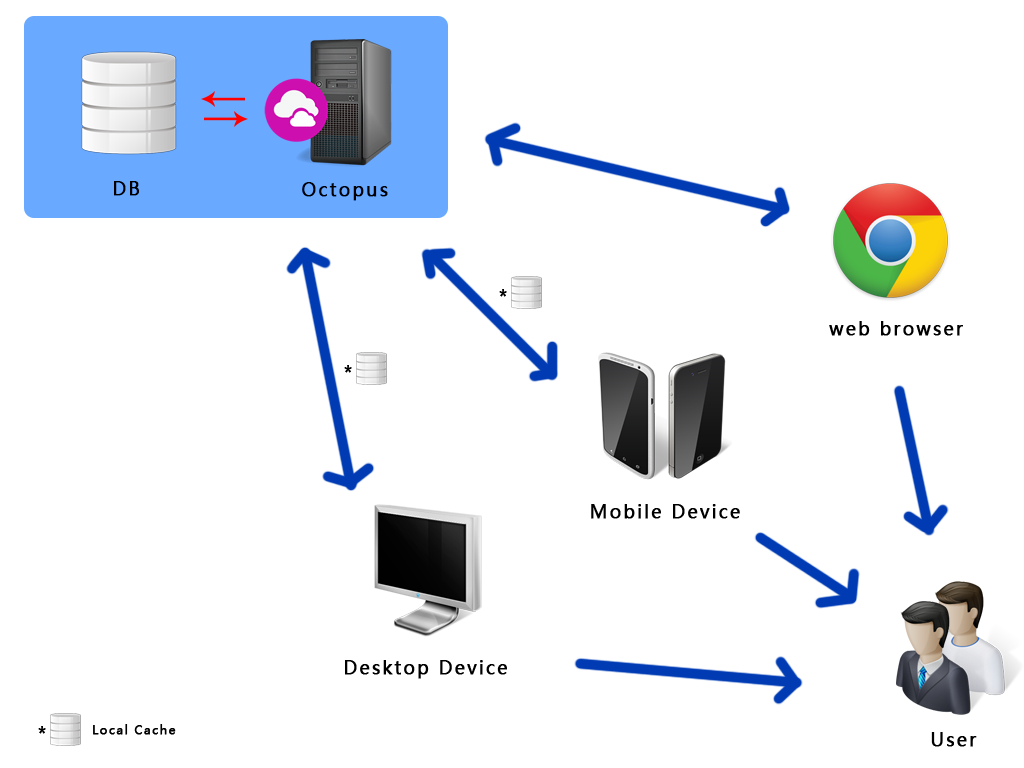
<style>
.page{position:relative;width:1024px;height:768px;background:#ffffff}
.page>*{position:absolute;margin:0}
.t1{font:18px "MicrosoftYaHei";letter-spacing:0.1em;color:#000000;font-weight:bold}
.t2{font:12px "MicrosoftYaHei";letter-spacing:0.1em;color:#000000;font-weight:bold}
</style>
<div class="page">
<p class="t1" style="left:114px;top:181px;width:25px;height:15px">DB</p>
<p class="t1" style="left:302px;top:182px;width:86px;height:19px">Octopus</p>
<p class="t1" style="left:499px;top:289px;width:8px;height:8px">*</p>
<p class="t1" style="left:829px;top:321px;width:134px;height:15px">web browser</p>
<p class="t1" style="left:344px;top:365px;width:8px;height:8px">*</p>
<p class="t1" style="left:591px;top:504px;width:149px;height:15px">Mobile Device</p>
<p class="t1" style="left:345px;top:660px;width:162px;height:19px">Desktop Device</p>
<p class="t1" style="left:38px;top:726px;width:8px;height:8px">*</p>
<p class="t2" style="left:93px;top:724px;width:83px;height:11px">Local Cache</p>
<p class="t1" style="left:931px;top:732px;width:46px;height:15px">User</p>
</div>
